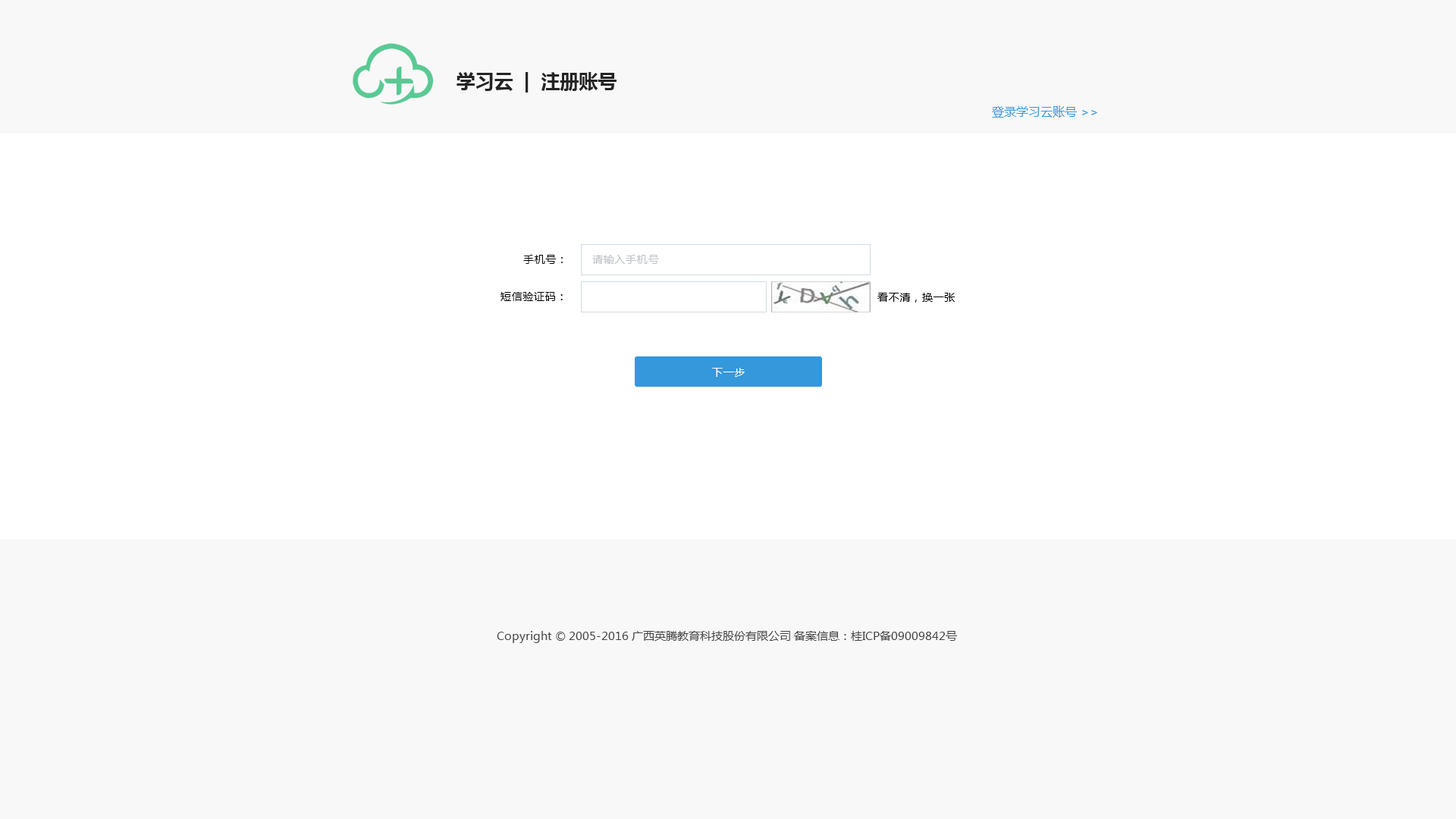
<style>
.page{position:relative;width:1456px;height:819px;background:#ffffff}
.page>*{position:absolute;margin:0}
.t1{font:19px "MicrosoftYaHei-Bold";color:#242424}
.t2{font:12.1px "MicrosoftYaHei";color:#3498db}
.t3{font:10.6px "MicrosoftYaHei";letter-spacing:0.05em;color:#000000}
.t4{font:10.6px "MicrosoftYaHei";letter-spacing:0.05em;color:#bdc3c7}
.t5{font:10.6px "MicrosoftYaHei";letter-spacing:0.05em;color:#ffffff}
.t6{font:11.4px "MicrosoftYaHei";color:#464646}
</style>
<div class="page">
<p class="t1" style="left:457px;top:72px;width:160px;height:21px">学习云  |  注册账号</p>
<p class="t2" style="left:992px;top:105px;width:105px;height:13px">登录学习云账号 &gt;&gt;</p>
<p class="t3" style="left:523px;top:255px;width:40px;height:9px">手机号：</p>
<p class="t4" style="left:592px;top:255px;width:67px;height:9px">请输入手机号</p>
<p class="t3" style="left:500px;top:292px;width:63px;height:9px">短信验证码：</p>
<p class="t3" style="left:877px;top:293px;width:78px;height:10px">看不清，换一张</p>
<p class="t5" style="left:712px;top:368px;width:33px;height:9px">下一步</p>
<p class="t6" style="left:497px;top:631px;width:460px;height:12px">Copyright © 2005-2016 广西英腾教育科技股份有限公司 备案信息：桂ICP备09009842号</p>
</div>
